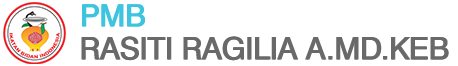
<style>
.page{position:relative;width:458px;height:66px;background:#ffffff}
.page>*{position:absolute;margin:0}
.t1{font:30.9px "Swiss721BT-Roman";color:#3dc5df}
.t2{font:30.9px "Swiss721BT-Roman";color:#696969}
</style>
<div class="page">
<p class="t1" style="left:82px;top:4px;width:63px;height:23px">PMB</p>
<p class="t1" style="left:83px;top:4px;width:63px;height:23px">PMB</p>
<p class="t2" style="left:81px;top:36px;width:367px;height:25px">RASITI RAGILIA A.MD.KEB</p>
<p class="t2" style="left:82px;top:36px;width:367px;height:25px">RASITI RAGILIA A.MD.KEB</p>
</div>
